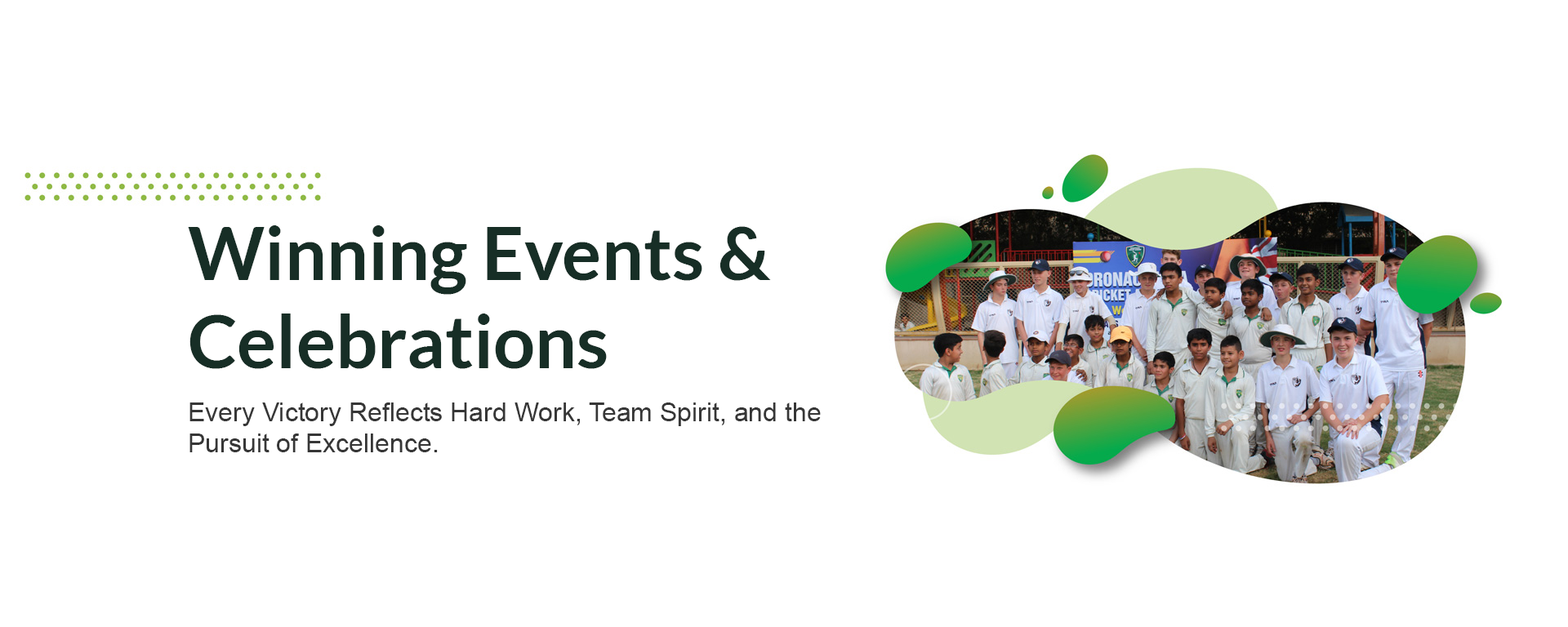
<style>
.page{position:relative;width:1568px;height:627px;background:#ffffff}
.page>*{position:absolute;margin:0}
.t1{font:73.5px "Lato-Bold";color:#172e26}
.t2{font:26.1px "ArialMT";color:#363636}
</style>
<div class="page">
<p class="t1" style="left:188px;top:225px;width:583px;height:144px">Winning Events &amp; <br>Celebrations</p>
<p class="t2" style="left:189px;top:403px;width:632px;height:49px">Every Victory Reflects Hard Work, Team Spirit, and the <br>Pursuit of Excellence.</p>
</div>
